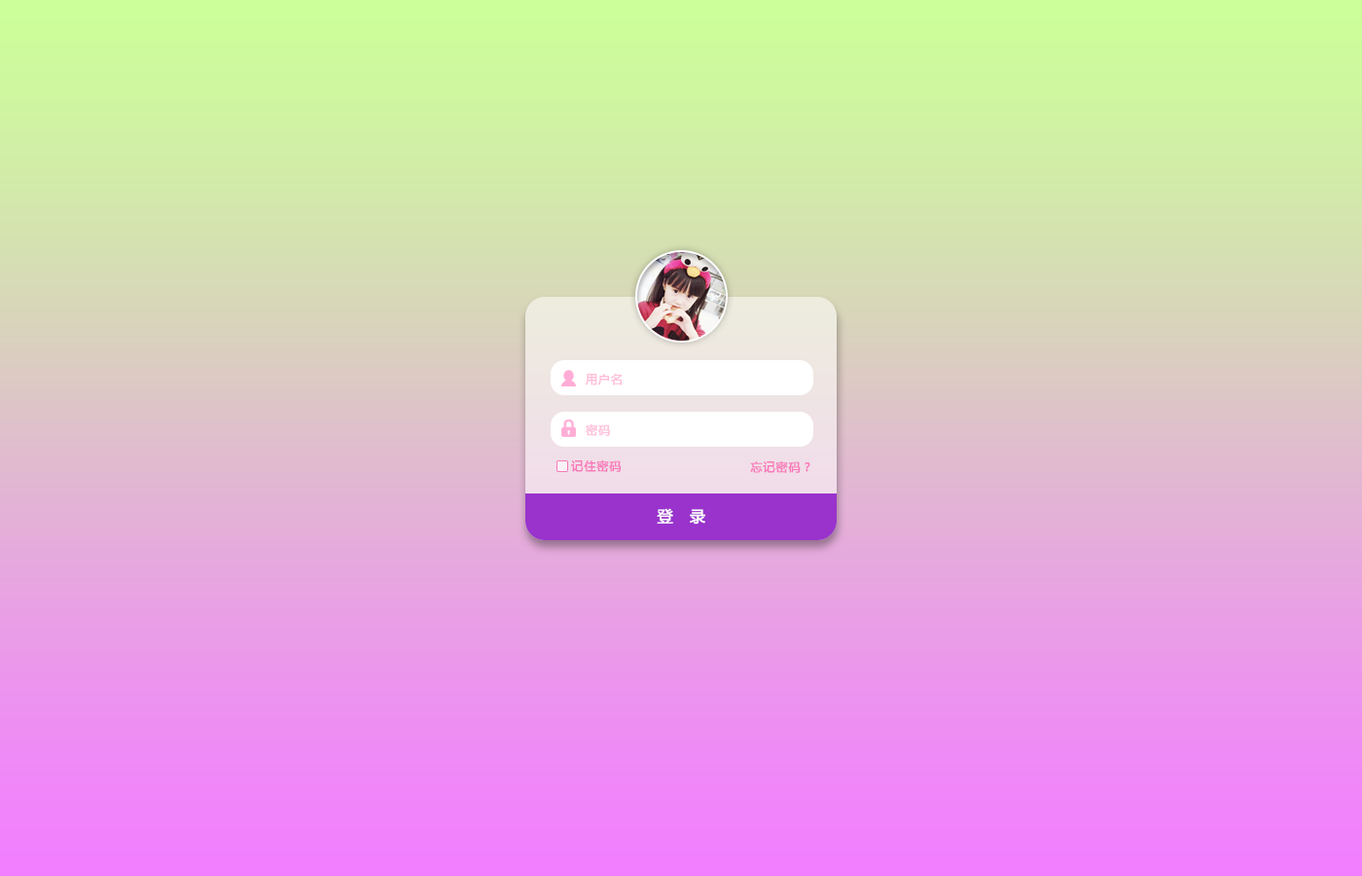
<style>
.page{position:relative;width:1362px;height:876px}
.page>*{position:absolute;margin:0}
.t1{font:11.7px "MicrosoftYaHei";letter-spacing:0.06em;color:#ffbfda;font-weight:bold}
.t2{font:11.7px "MicrosoftYaHei";letter-spacing:0.06em;color:#f978b9;font-weight:bold}
.t3{font:11.7px "MicrosoftYaHei";letter-spacing:0.06em;color:#f977b9;font-weight:bold}
.t4{font:15.6px "MicrosoftYaHei";letter-spacing:1.06em;color:#ffffff;font-weight:bold}
</style>
<div class="page">
<p class="t1" style="left:585px;top:374px;width:38px;height:11px">用户名</p>
<p class="t1" style="left:586px;top:424px;width:24px;height:12px">密码</p>
<p class="t2" style="left:571px;top:460px;width:51px;height:12px">记住密码</p>
<p class="t3" style="left:750px;top:461px;width:60px;height:12px">忘记密码？</p>
<p class="t4" style="left:657px;top:508px;width:49px;height:16px">登录</p>
</div>
